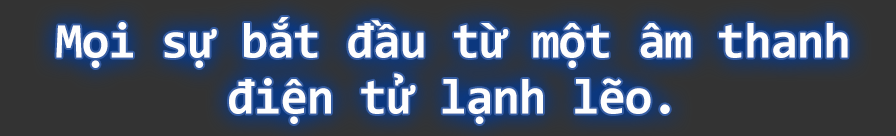
<style>
.page{position:relative;width:896px;height:136px;background:#333333}
.page>*{position:absolute;margin:0}
.t1{font:50px/48px "Consolas-Bold";letter-spacing:-0.02em;color:#fefefe}
</style>
<div class="page">
<p class="t1" style="left:56px;top:17px;width:792px;height:107px;text-align:center">Mọi sự bắt đầu từ một âm thanh <br>điện tử lạnh lẽo.</p>
</div>
